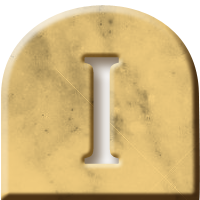
<style>
.page{position:relative;width:200px;height:200px}
.page>*{position:absolute;margin:0}
.t1{font:158.1px "Cambria";letter-spacing:0.025em;font-weight:bold}
</style>
<div class="page">
<p class="t1" style="left:84px;top:57px;width:35px;height:107px">I</p>
</div>
